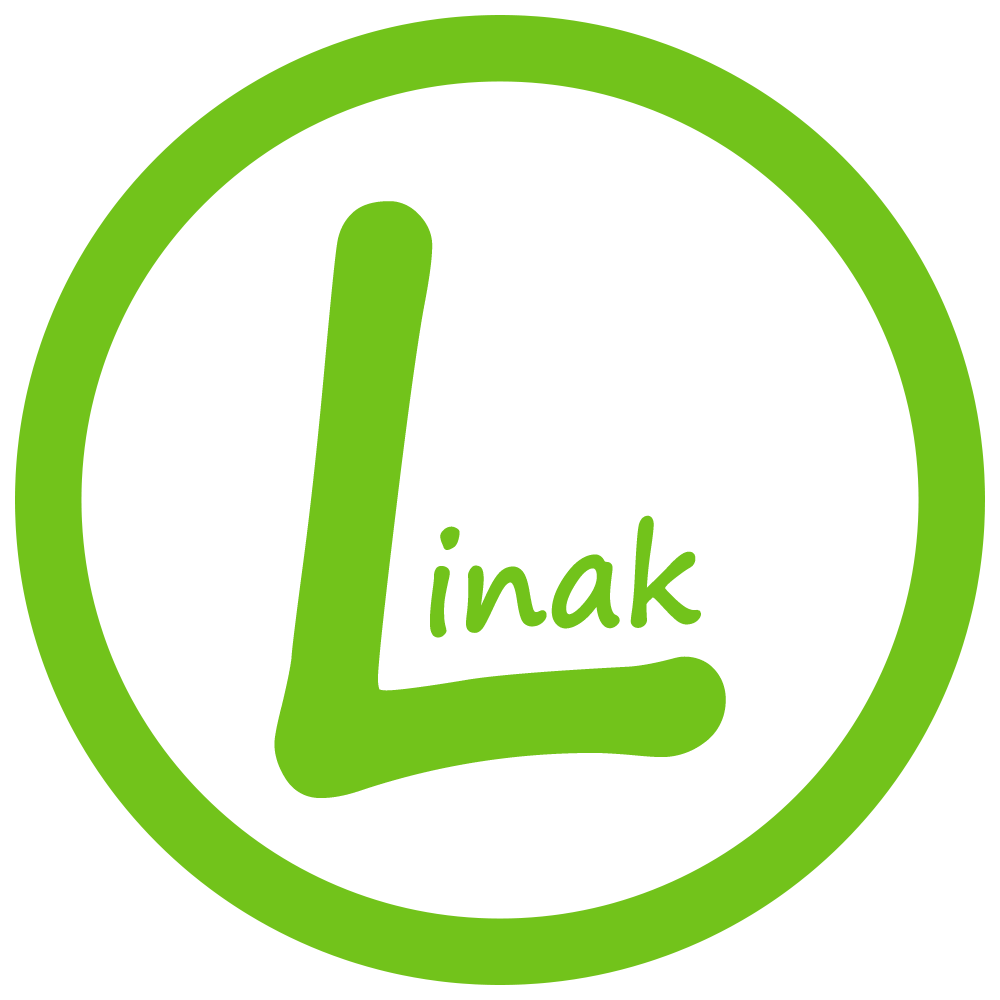
<style>
.page{position:relative;width:1000px;height:1000px;background:#ffffff}
.page>*{position:absolute;margin:0}
.t1{font:776.7px "SegoePrint";letter-spacing:-0.01em;color:#72c31b;font-weight:bold}
.t2{font:127.8px "SegoePrint";letter-spacing:-0.01em;color:#72c31b;font-weight:bold}
</style>
<div class="page">
<p class="t1" style="left:274px;top:201px;width:452px;height:597px">L</p>
<p class="t2" style="left:430px;top:515px;width:271px;height:123px;rotate:-3deg">inak</p>
</div>
